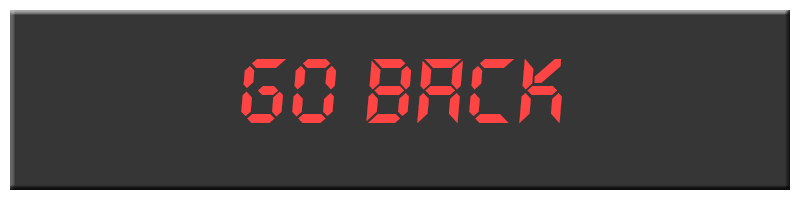
<style>
.page{position:relative;width:800px;height:200px;background:#363636}
.page>*{position:absolute;margin:0}
.t1{font:100px "LetsgoDigital-Regular";color:#ff4444}
</style>
<div class="page">
<p class="t1" style="left:241px;top:59px;width:321px;height:65px">GO BACK</p>
</div>
